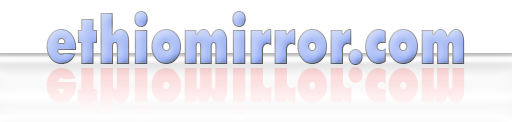
<style>
.page{position:relative;width:512px;height:122px;background:#ffffff}
.page>*{position:absolute;margin:0}
.t1{font:67.5px "FuturaBT-ExtraBlack";scale:0.74 1}
.t2{font:67.5px "FuturaBT-ExtraBlack";color:#fce5e5;scale:0.74 1}
</style>
<div class="page">
<p class="t1" style="left:46px;top:11px;width:419px;height:54px">ethiomirror.com</p>
<p class="t2" style="left:46px;top:67px;width:419px;height:54px">ethiomirror.com</p>
</div>
